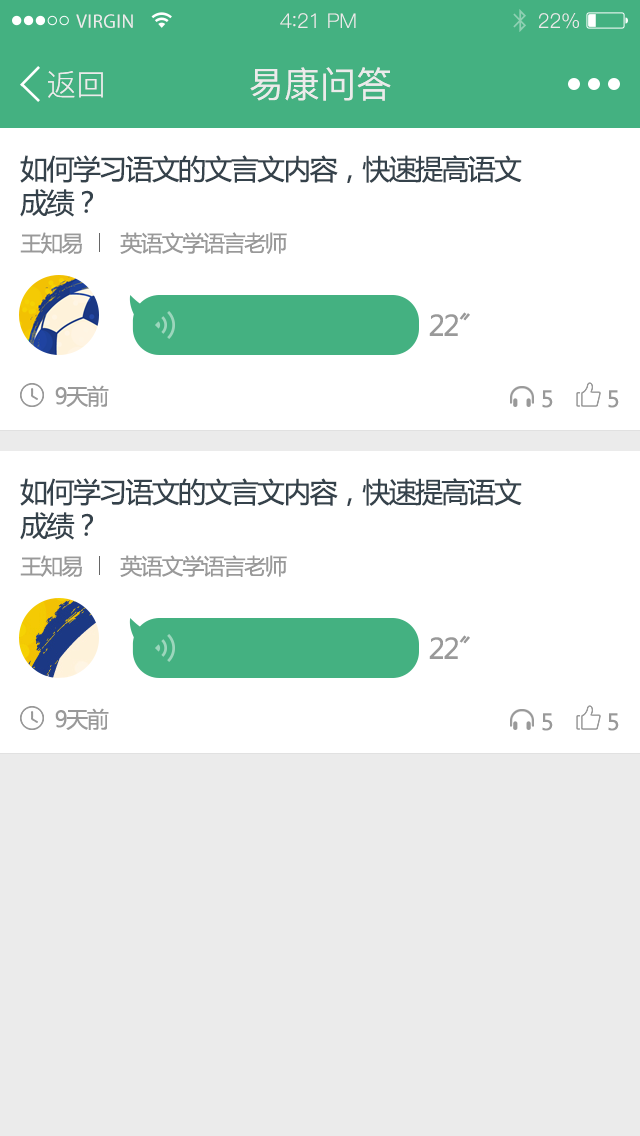
<style>
.page{position:relative;width:640px;height:1136px;background:#ffffff}
.page>*{position:absolute;margin:0}
.t1{font:19.6px "MyriadPro-Regular";letter-spacing:0.02em;color:#ebebeb}
.t2{font:20.4px "PingFang-SC-Regular";letter-spacing:-0.02em;color:#ebebeb}
.t3{font:22.1px "PingFang-SC-Regular";letter-spacing:-0.02em;color:#ebebeb}
.t4{font:30px "PingFang-SC-Regular";color:#ebebeb}
.t5{font:36px "PingFang-SC-Medium";color:#ebebeb}
.t6{font:28px "MicrosoftYaHei";letter-spacing:-0.06em;color:#35424b}
.t7{font:22px "MicrosoftYaHei";letter-spacing:-0.06em;color:#999999}
.t8{font:28px "MicrosoftYaHei";letter-spacing:-0.06em;color:#999999}
</style>
<div class="page">
<p class="t1" style="left:76px;top:14px;width:57px;height:14px">VIRGIN</p>
<p class="t2" style="left:280px;top:13px;width:76px;height:15px">4<span class="t3">:</span>21 PM</p>
<p class="t2" style="left:539px;top:13px;width:40px;height:16px">22%</p>
<p class="t4" style="left:48px;top:71px;width:55px;height:27px">返回</p>
<p class="t5" style="left:250px;top:67px;width:141px;height:34px">易康问答</p>
<p class="t6" style="left:20px;top:155px;width:502px;height:62px">如何学习语文的文言文内容，快速提高语文<br>成绩？</p>
<p class="t7" style="left:20px;top:232px;width:62px;height:22px">王知易</p>
<p class="t7" style="left:120px;top:232px;width:167px;height:22px">英语文学语言老师</p>
<p class="t8" style="left:429px;top:312px;width:41px;height:24px">22〞</p>
<p class="t7" style="left:55px;top:385px;width:54px;height:22px">9天前</p>
<p class="t7" style="left:542px;top:390px;width:11px;height:18px">5</p>
<p class="t7" style="left:608px;top:390px;width:11px;height:18px">5</p>
<p class="t6" style="left:20px;top:478px;width:502px;height:62px">如何学习语文的文言文内容，快速提高语文<br>成绩？</p>
<p class="t7" style="left:20px;top:555px;width:62px;height:22px">王知易</p>
<p class="t7" style="left:120px;top:555px;width:167px;height:22px">英语文学语言老师</p>
<p class="t8" style="left:429px;top:635px;width:41px;height:24px">22〞</p>
<p class="t7" style="left:55px;top:708px;width:54px;height:22px">9天前</p>
<p class="t7" style="left:542px;top:713px;width:11px;height:18px">5</p>
<p class="t7" style="left:608px;top:713px;width:11px;height:18px">5</p>
</div>
